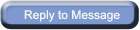
<style>
.page{position:relative;width:140px;height:30px;background:#7e99d0}
.page>*{position:absolute;margin:0}
.t1{font:12px "ArialMT";color:#f3f5f1}
</style>
<div class="page">
<p class="t1" style="left:24px;top:10px;width:96px;height:12px">Reply to Message</p>
</div>
